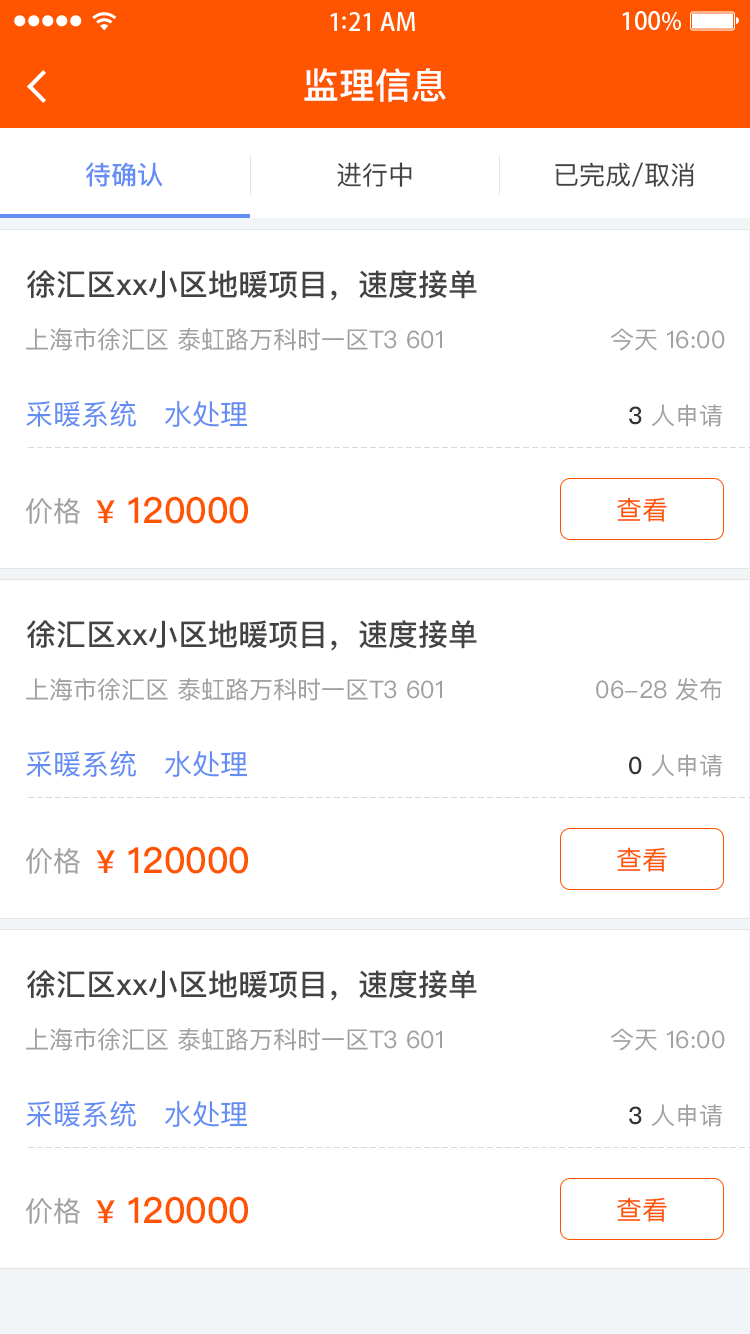
<style>
.page{position:relative;width:750px;height:1334px;background:#ffffff}
.page>*{position:absolute;margin:0}
.t1{font:36px "PingFangSC-Medium";color:#ffffff}
.t2{font:26px "PingFangSC-Medium";color:#648df6}
.t3{font:26px "PingFangSC-Regular";color:#434343}
.t4{font:30px "PingFangSC-Medium";color:#434343}
.t5{font:24px "PingFangSC-Regular";color:#a0a0a0}
.t6{font:28px "PingFangSC-Regular";color:#648df4}
.t7{font:24px "PingFangSC-Medium";color:#343434}
.t8{font:36px "PingFangSC-Medium";color:#ff5400}
.t9{font:32px "PingFangSC-Medium";color:#ff5400}
.t10{font:26px "PingFangSC-Regular";color:#ff5400}
.t11{font:28px "PingFangSC-Regular";color:#a0a0a0}
</style>
<div class="page">
<p class="t1" style="left:304px;top:68px;width:142px;height:34px">监理信息</p>
<p class="t2" style="left:86px;top:162px;width:77px;height:25px">待确认</p>
<p class="t3" style="left:337px;top:162px;width:75px;height:25px">进行中</p>
<p class="t3" style="left:555px;top:162px;width:140px;height:25px">已完成/取消</p>
<p class="t4" style="left:27px;top:270px;width:450px;height:31px">徐汇区xx小区地暖项目，速度接单</p>
<p class="t5" style="left:26px;top:328px;width:416px;height:23px">上海市徐汇区 泰虹路万科时一区T3 601</p>
<p class="t5" style="left:611px;top:328px;width:114px;height:23px">今天 16:00</p>
<p class="t6" style="left:26px;top:400px;width:110px;height:27px">采暖系统</p>
<p class="t6" style="left:165px;top:400px;width:82px;height:27px">水处理</p>
<p class="t5" style="left:629px;top:404px;width:93px;height:23px"><span class="t7">3</span> 人申请</p>
<p class="t8" style="left:96px;top:496px;width:152px;height:28px"><span class="t9">¥</span> 120000</p>
<p class="t10" style="left:617px;top:497px;width:50px;height:25px">查看</p>
<p class="t11" style="left:26px;top:498px;width:54px;height:26px">价格</p>
<p class="t4" style="left:27px;top:620px;width:450px;height:31px">徐汇区xx小区地暖项目，速度接单</p>
<p class="t5" style="left:26px;top:678px;width:416px;height:23px">上海市徐汇区 泰虹路万科时一区T3 601</p>
<p class="t5" style="left:596px;top:678px;width:126px;height:23px">06-28 发布</p>
<p class="t6" style="left:26px;top:750px;width:110px;height:27px">采暖系统</p>
<p class="t6" style="left:165px;top:750px;width:82px;height:27px">水处理</p>
<p class="t5" style="left:629px;top:754px;width:93px;height:23px"><span class="t7">0</span> 人申请</p>
<p class="t8" style="left:96px;top:846px;width:152px;height:28px"><span class="t9">¥</span> 120000</p>
<p class="t11" style="left:26px;top:848px;width:54px;height:26px">价格</p>
<p class="t10" style="left:617px;top:847px;width:50px;height:25px">查看</p>
<p class="t4" style="left:27px;top:970px;width:450px;height:31px">徐汇区xx小区地暖项目，速度接单</p>
<p class="t5" style="left:26px;top:1028px;width:416px;height:23px">上海市徐汇区 泰虹路万科时一区T3 601</p>
<p class="t5" style="left:611px;top:1028px;width:114px;height:23px">今天 16:00</p>
<p class="t6" style="left:26px;top:1100px;width:110px;height:27px">采暖系统</p>
<p class="t6" style="left:165px;top:1100px;width:82px;height:27px">水处理</p>
<p class="t5" style="left:629px;top:1104px;width:93px;height:23px"><span class="t7">3</span> 人申请</p>
<p class="t11" style="left:26px;top:1198px;width:54px;height:26px">价格</p>
<p class="t8" style="left:96px;top:1196px;width:152px;height:28px"><span class="t9">¥</span> 120000</p>
<p class="t10" style="left:617px;top:1197px;width:50px;height:25px">查看</p>
</div>
